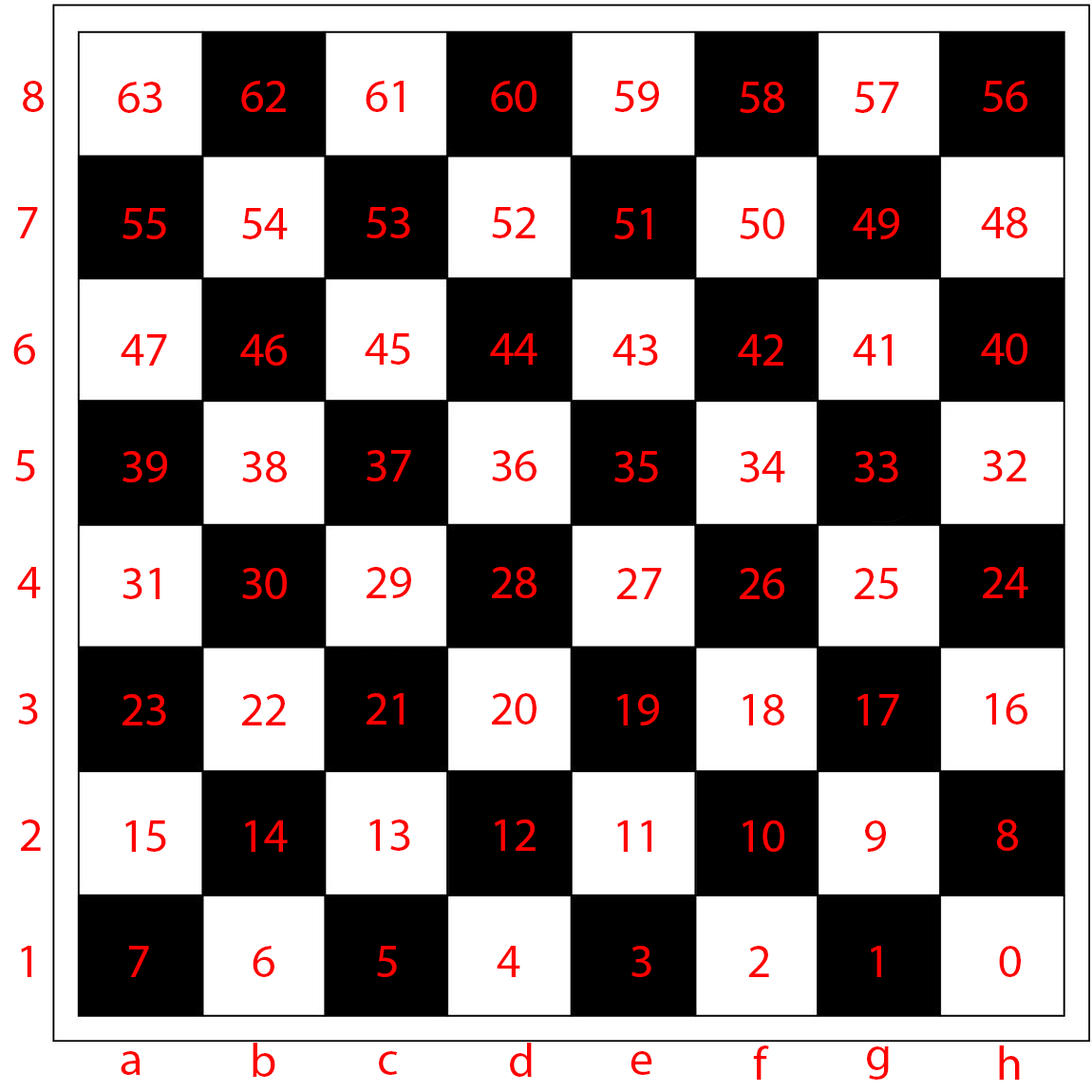
<style>
.page{position:relative;width:1092px;height:1092px;background:#ffffff}
.page>*{position:absolute;margin:0}
.t1{font:47.5px "MyriadPro-Regular";color:#ff0000}
</style>
<div class="page">
<p class="t1" style="left:23px;top:81px;width:21px;height:31px">8</p>
<p class="t1" style="left:118px;top:82px;width:44px;height:31px">63</p>
<p class="t1" style="left:241px;top:81px;width:45px;height:31px">62</p>
<p class="t1" style="left:366px;top:81px;width:38px;height:31px">61</p>
<p class="t1" style="left:491px;top:81px;width:45px;height:31px">60</p>
<p class="t1" style="left:614px;top:81px;width:45px;height:31px">59</p>
<p class="t1" style="left:740px;top:82px;width:44px;height:31px">58</p>
<p class="t1" style="left:855px;top:82px;width:44px;height:31px">57</p>
<p class="t1" style="left:983px;top:81px;width:44px;height:31px">56</p>
<p class="t1" style="left:18px;top:207px;width:20px;height:31px">7</p>
<p class="t1" style="left:122px;top:208px;width:44px;height:31px">55</p>
<p class="t1" style="left:242px;top:208px;width:46px;height:31px">54</p>
<p class="t1" style="left:367px;top:207px;width:43px;height:31px">53</p>
<p class="t1" style="left:492px;top:207px;width:44px;height:31px">52</p>
<p class="t1" style="left:614px;top:208px;width:37px;height:31px">51</p>
<p class="t1" style="left:740px;top:208px;width:44px;height:31px">50</p>
<p class="t1" style="left:853px;top:208px;width:46px;height:31px">49</p>
<p class="t1" style="left:981px;top:207px;width:46px;height:31px">48</p>
<p class="t1" style="left:13px;top:333px;width:22px;height:32px">6</p>
<p class="t1" style="left:121px;top:334px;width:46px;height:32px">47</p>
<p class="t1" style="left:240px;top:334px;width:47px;height:32px">46</p>
<p class="t1" style="left:365px;top:333px;width:45px;height:32px">45</p>
<p class="t1" style="left:490px;top:333px;width:47px;height:32px">44</p>
<p class="t1" style="left:612px;top:334px;width:46px;height:32px">43</p>
<p class="t1" style="left:738px;top:334px;width:45px;height:32px">42</p>
<p class="t1" style="left:853px;top:334px;width:39px;height:32px">41</p>
<p class="t1" style="left:981px;top:333px;width:46px;height:32px">40</p>
<p class="t1" style="left:15px;top:450px;width:20px;height:31px">5</p>
<p class="t1" style="left:122px;top:451px;width:45px;height:31px">39</p>
<p class="t1" style="left:242px;top:451px;width:45px;height:31px">38</p>
<p class="t1" style="left:367px;top:450px;width:44px;height:31px">37</p>
<p class="t1" style="left:492px;top:450px;width:44px;height:31px">36</p>
<p class="t1" style="left:614px;top:451px;width:44px;height:31px">35</p>
<p class="t1" style="left:740px;top:451px;width:45px;height:31px">34</p>
<p class="t1" style="left:855px;top:451px;width:43px;height:31px">33</p>
<p class="t1" style="left:983px;top:450px;width:43px;height:31px">32</p>
<p class="t1" style="left:17px;top:567px;width:24px;height:31px">4</p>
<p class="t1" style="left:122px;top:568px;width:38px;height:31px">31</p>
<p class="t1" style="left:242px;top:568px;width:45px;height:31px">30</p>
<p class="t1" style="left:367px;top:567px;width:44px;height:31px">29</p>
<p class="t1" style="left:492px;top:567px;width:44px;height:31px">28</p>
<p class="t1" style="left:617px;top:568px;width:45px;height:31px">27</p>
<p class="t1" style="left:740px;top:568px;width:44px;height:31px">26</p>
<p class="t1" style="left:855px;top:568px;width:43px;height:31px">25</p>
<p class="t1" style="left:983px;top:567px;width:45px;height:31px">24</p>
<p class="t1" style="left:18px;top:693px;width:20px;height:32px">3</p>
<p class="t1" style="left:122px;top:694px;width:44px;height:31px">23</p>
<p class="t1" style="left:242px;top:694px;width:44px;height:31px">22</p>
<p class="t1" style="left:367px;top:693px;width:37px;height:32px">21</p>
<p class="t1" style="left:492px;top:693px;width:44px;height:32px">20</p>
<p class="t1" style="left:617px;top:694px;width:42px;height:31px">19</p>
<p class="t1" style="left:743px;top:694px;width:41px;height:31px">18</p>
<p class="t1" style="left:857px;top:694px;width:42px;height:31px">17</p>
<p class="t1" style="left:986px;top:693px;width:41px;height:32px">16</p>
<p class="t1" style="left:21px;top:819px;width:20px;height:32px">2</p>
<p class="t1" style="left:125px;top:820px;width:41px;height:32px">15</p>
<p class="t1" style="left:245px;top:820px;width:43px;height:32px">14</p>
<p class="t1" style="left:369px;top:819px;width:41px;height:32px">13</p>
<p class="t1" style="left:495px;top:819px;width:41px;height:32px">12</p>
<p class="t1" style="left:617px;top:820px;width:34px;height:32px">11</p>
<p class="t1" style="left:743px;top:820px;width:41px;height:32px">10</p>
<p class="t1" style="left:865px;top:820px;width:21px;height:32px">9</p>
<p class="t1" style="left:997px;top:819px;width:21px;height:32px">8</p>
<p class="t1" style="left:21px;top:946px;width:10px;height:31px">1</p>
<p class="t1" style="left:129px;top:946px;width:20px;height:31px">7</p>
<p class="t1" style="left:253px;top:946px;width:21px;height:31px">6</p>
<p class="t1" style="left:377px;top:946px;width:20px;height:31px">5</p>
<p class="t1" style="left:497px;top:946px;width:23px;height:31px">4</p>
<p class="t1" style="left:631px;top:946px;width:20px;height:31px">3</p>
<p class="t1" style="left:749px;top:946px;width:20px;height:31px">2</p>
<p class="t1" style="left:871px;top:946px;width:10px;height:31px">1</p>
<p class="t1" style="left:999px;top:946px;width:22px;height:31px">0</p>
<p class="t1" style="left:253px;top:1043px;width:22px;height:34px">b</p>
<p class="t1" style="left:510px;top:1043px;width:22px;height:34px">d</p>
<p class="t1" style="left:753px;top:1045px;width:16px;height:35px">f</p>
<p class="t1" style="left:867px;top:1046px;width:22px;height:34px">g</p>
<p class="t1" style="left:999px;top:1045px;width:21px;height:35px">h</p>
<p class="t1" style="left:121px;top:1051px;width:20px;height:24px">a</p>
<p class="t1" style="left:379px;top:1051px;width:18px;height:24px">c</p>
<p class="t1" style="left:631px;top:1051px;width:21px;height:24px">e</p>
</div>
